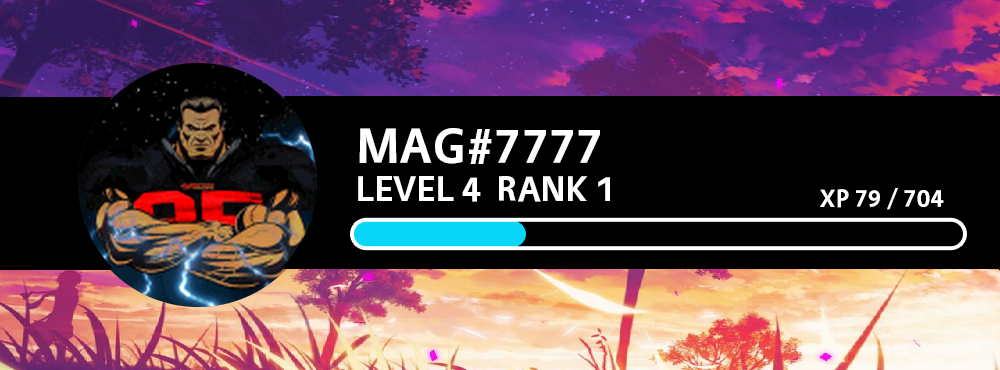
<style>
.page{position:relative;width:1000px;height:370px;background:#000000}
.page>*{position:absolute;margin:0}
.t1{font:50px "Vegur-Bold";letter-spacing:0.025em;color:#ffffff;text-transform:uppercase}
.t2{font:36px "Vegur-Bold";letter-spacing:0.025em;color:#ffffff;text-transform:uppercase}
.t3{font:25px "Vegur-Bold";letter-spacing:0.025em;color:#ffffff;text-transform:uppercase}
</style>
<div class="page">
<p class="t1" style="left:359px;top:128px;width:241px;height:36px">MAG#7777</p>
<p class="t2" style="left:358px;top:176px;width:252px;height:26px">LEVEL 4  RANK 1</p>
<p class="t3" style="left:820px;top:188px;width:124px;height:22px">XP 79 / 704</p>
</div>
